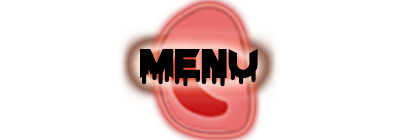
<style>
.page{position:relative;width:406px;height:140px;background:#ffffff}
.page>*{position:absolute;margin:0}
.t1{font:42.1px "ThrashDecision";color:#000000}
</style>
<div class="page">
<p class="t1" style="left:140px;top:49px;width:118px;height:38px">Menu</p>
</div>
